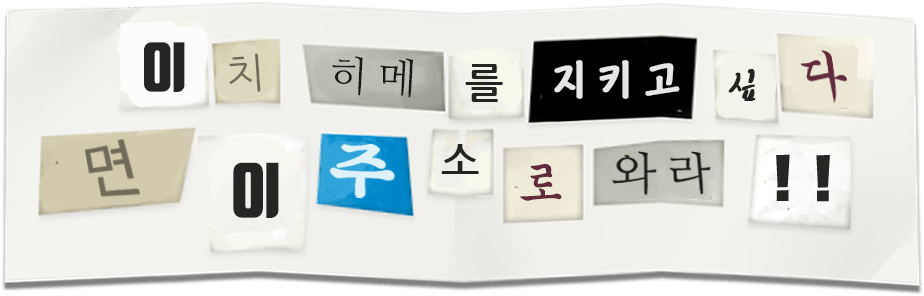
<style>
.page{position:relative;width:924px;height:296px}
.page>*{position:absolute;margin:0}
.t1{font:54px "TmonMonsoriBlack";letter-spacing:0.24em;color:#252524}
.t2{font:41px "NanumGothic";letter-spacing:0.24em;color:#706b58}
.t3{font:41px "NanumMyeongjo";letter-spacing:0.24em;color:#181817}
.t4{font:41px "KoreanCNM-B";letter-spacing:0.24em;color:#e6e6e6;font-weight:bold}
.t5{font:41px "Makgeolli";letter-spacing:0.24em;color:#232322;font-weight:bold}
.t6{font:41px "NanumGothicBold";letter-spacing:0.24em;color:#232322}
.t7{font:60px "TmonMonsoriBlack";letter-spacing:0.24em;color:#252524}
.t8{font:54px "MGungJeong";letter-spacing:0.24em;color:#622b3b}
</style>
<div class="page">
<p class="t1" style="left:144px;top:42px;width:41px;height:50px">이</p>
<p class="t2" style="left:229px;top:53px;width:32px;height:39px;rotate:-4deg">치</p>
<p class="t3" style="left:332px;top:56px;width:82px;height:42px;rotate:3deg">히메</p>
<p class="t4" style="left:554px;top:60px;width:126px;height:39px">지키고</p>
<p class="t5" style="left:728px;top:69px;width:28px;height:32px">싶</p>
<p class="t6" style="left:441px;top:144px;width:38px;height:30px">소</p>
<p class="t7" style="left:233px;top:162px;width:46px;height:56px">이</p>
<p class="t8" style="left:520px;top:164px;width:42px;height:37px">로</p>
</div>
